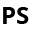
<style>
.page{position:relative;width:32px;height:32px;background:#ffffff}
.page>*{position:absolute;margin:0}
.t1{font:24px "OpenSans-Bold";color:#000000}
</style>
<div class="page">
<p class="t1" style="left:3px;top:7px;width:26px;height:17px">PS</p>
</div>
